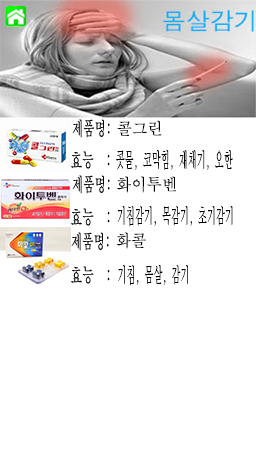
<style>
.page{position:relative;width:256px;height:454px;background:#ffffff}
.page>*{position:absolute;margin:0}
.t1{font:16.9px "BatangChe";color:#000000;scale:0.91 1}
.t2{font:21.1px "BatangChe";color:#000000;scale:0.43 1}
</style>
<div class="page">
<p class="t1" style="left:117px;top:120px;width:45px;height:16px">콜그린</p>
<p class="t2" style="left:116px;top:150px;width:117px;height:20px">콧물, 코막힘, 재채기, 오한</p>
<p class="t1" style="left:117px;top:176px;width:59px;height:17px">화이투벤</p>
<p class="t2" style="left:117px;top:206px;width:116px;height:21px">기침감기, 목감기, 초기감기</p>
<p class="t1" style="left:116px;top:232px;width:30px;height:17px">화콜</p>
<p class="t2" style="left:118px;top:265px;width:70px;height:21px">기침, 몸살, 감기</p>
</div>
